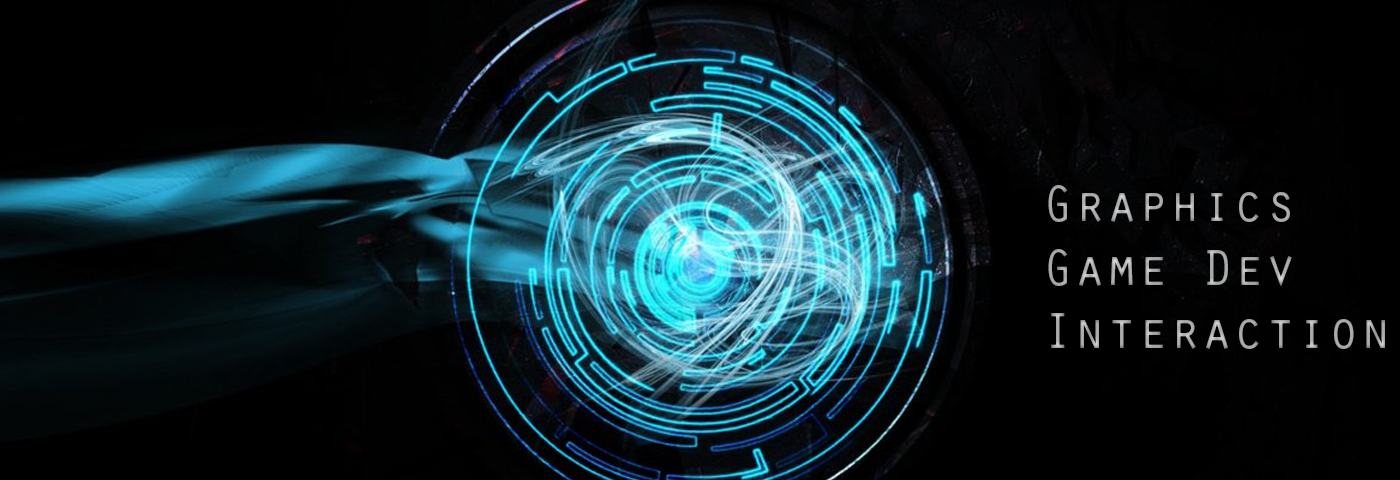
<style>
.page{position:relative;width:1400px;height:480px;background:#000000}
.page>*{position:absolute;margin:0}
.t1{font:53px "OratorStd";color:#aaaaaa}
</style>
<div class="page">
<p class="t1" style="left:1048px;top:185px;width:337px;height:164px">Graphics<br>Game Dev<br>Interaction</p>
</div>
